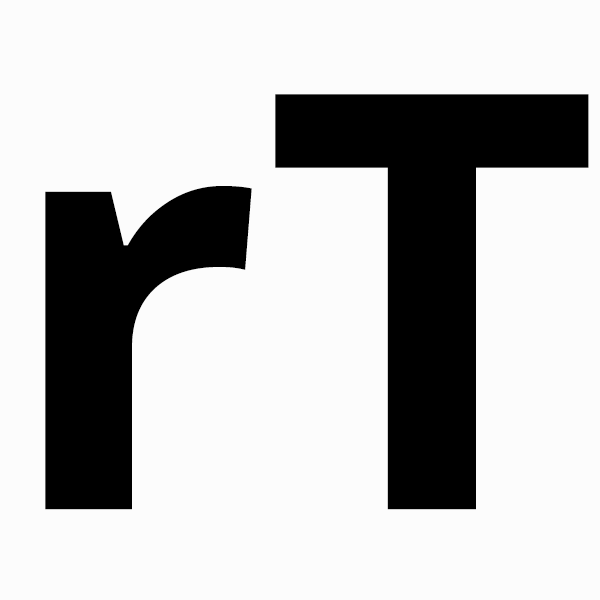
<style>
.page{position:relative;width:600px;height:600px;background:#fcfcfc}
.page>*{position:absolute;margin:0}
.t1{font:580.6px "OpenSans-Bold";color:#000000}
</style>
<div class="page">
<p class="t1" style="left:45px;top:94px;width:544px;height:416px">rT</p>
</div>
